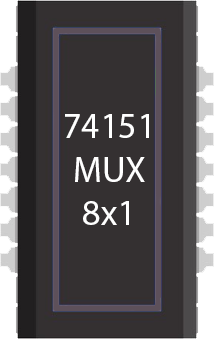
<style>
.page{position:relative;width:214px;height:339px;background:#343031}
.page>*{position:absolute;margin:0}
.t1{font:36px "MyriadPro-Regular";color:#ffffff}
</style>
<div class="page">
<p class="t1" style="left:65px;top:114px;width:84px;height:111px;text-align:center">74151<br>MUX<br>8x1</p>
</div>
